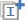
<style>
.page{position:relative;width:27px;height:21px;background:#ffffff}
.page>*{position:absolute;margin:0}
.t1{font:17.5px "Arial-Black";color:#4377bd}
.t2{font:16px "CourierNewPS-BoldMT";color:#4377bd}
</style>
<div class="page">
<p class="t1" style="left:15px;top:0px;width:10px;height:10px">+</p>
<p class="t2" style="left:6px;top:7px;width:9px;height:9px">I</p>
</div>
